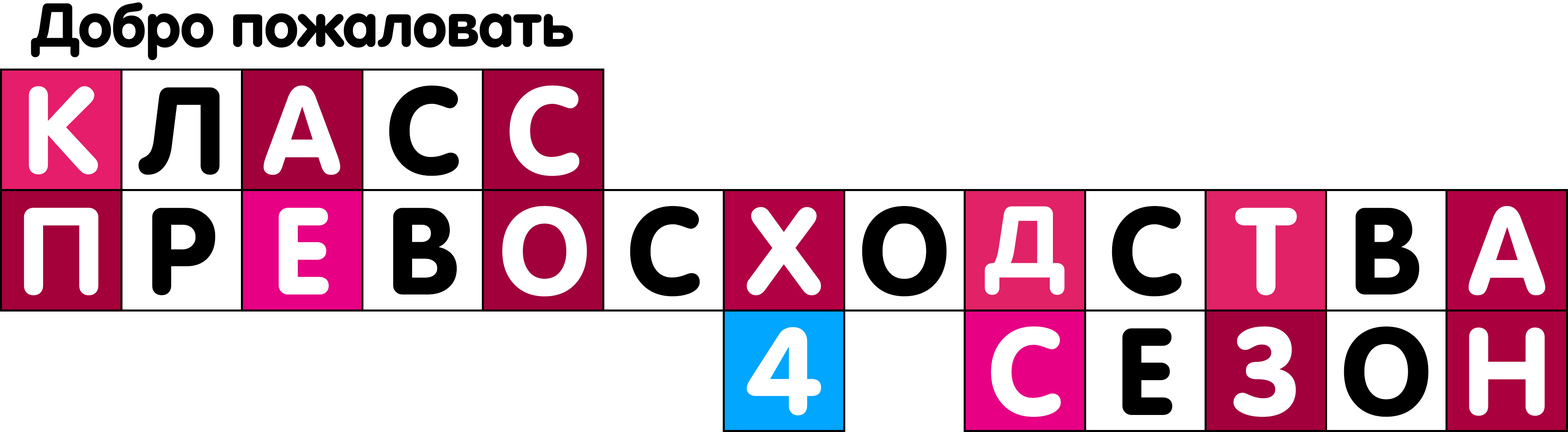
<style>
.page{position:relative;width:1568px;height:432px;background:#ffffff}
.page>*{position:absolute;margin:0}
.t1{font:60.7px "VAGRoundedNext-Heavy";color:#000000}
.t2{font:121.7px "VAGRoundedNext-Heavy";color:#ffffff;text-transform:uppercase}
.t3{font:121.8px "VAGRoundedNext-Heavy";color:#000000;text-transform:uppercase}
.t4{font:121.8px "VAGRoundedNext-Heavy";color:#ffffff;text-transform:uppercase}
.t5{font:121.7px "VAGRoundedNext-Heavy";color:#000000;text-transform:uppercase}
.t6{font:99.9px "VAGRoundedNext-Heavy";color:#ffffff;text-transform:uppercase}
</style>
<div class="page">
<p class="t1" style="left:31px;top:2px;width:542px;height:58px">Добро пожаловать</p>
<p class="t2" style="left:29px;top:86px;width:69px;height:88px">к</p>
<p class="t3" style="left:138px;top:87px;width:82px;height:88px">л</p>
<p class="t4" style="left:264px;top:85px;width:76px;height:90px">а</p>
<p class="t3" style="left:389px;top:85px;width:70px;height:91px">с</p>
<p class="t4" style="left:509px;top:85px;width:71px;height:91px">С</p>
<p class="t2" style="left:24px;top:208px;width:75px;height:87px">П</p>
<p class="t5" style="left:152px;top:208px;width:63px;height:87px">Р</p>
<p class="t2" style="left:279px;top:208px;width:50px;height:86px">Е</p>
<p class="t5" style="left:393px;top:208px;width:64px;height:86px">В</p>
<p class="t2" style="left:502px;top:206px;width:85px;height:90px">О</p>
<p class="t5" style="left:630px;top:206px;width:70px;height:90px">С</p>
<p class="t2" style="left:747px;top:207px;width:74px;height:88px">Х</p>
<p class="t5" style="left:862px;top:206px;width:85px;height:90px">О</p>
<p class="t6" style="left:985px;top:206px;width:80px;height:89px">Д</p>
<p class="t5" style="left:1112px;top:206px;width:70px;height:90px">С</p>
<p class="t2" style="left:1235px;top:208px;width:62px;height:87px">Т</p>
<p class="t5" style="left:1355px;top:208px;width:65px;height:86px">В</p>
<p class="t2" style="left:1469px;top:206px;width:76px;height:89px">А</p>
<p class="t2" style="left:747px;top:327px;width:74px;height:88px">4</p>
<p class="t4" style="left:991px;top:326px;width:70px;height:91px">С</p>
<p class="t3" style="left:1122px;top:328px;width:51px;height:87px">Е</p>
<p class="t4" style="left:1233px;top:326px;width:63px;height:91px">З</p>
<p class="t3" style="left:1344px;top:326px;width:84px;height:91px">О</p>
<p class="t4" style="left:1469px;top:327px;width:76px;height:89px">Н</p>
</div>
